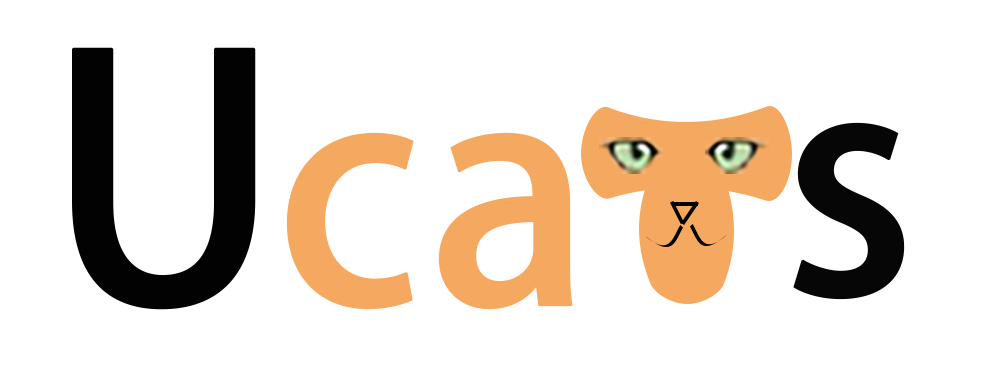
<style>
.page{position:relative;width:984px;height:366px;background:#ffffff}
.page>*{position:absolute;margin:0}
.t1{font:333.5px "AdobeHeitiStd-Regular";color:#020202;font-weight:bold}
.t2{font:303.2px "AdobeHeitiStd-Regular";color:#060606;font-weight:bold}
.t3{font:303.2px "AdobeHeitiStd-Regular";color:#f5a860;font-weight:bold}
</style>
<div class="page">
<p class="t1" style="left:72px;top:47px;width:184px;height:263px">U</p>
<p class="t2" style="left:793px;top:122px;width:112px;height:178px">s</p>
<p class="t3" style="left:286px;top:132px;width:287px;height:178px">ca</p>
</div>
